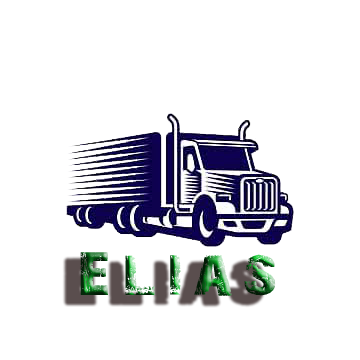
<style>
.page{position:relative;width:360px;height:360px;background:#ffffff}
.page>*{position:absolute;margin:0}
.t1{font:60px "28-Days-Later-Regular";letter-spacing:0.15em;scale:1.21 1}
</style>
<div class="page">
<p class="t1" style="left:80px;top:252px;width:196px;height:44px">Elias</p>
</div>
